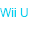
<style>
.page{position:relative;width:30px;height:30px;background:#ffffff}
.page>*{position:absolute;margin:0}
.t1{font:12px "ArialMT";color:#01d0ef}
</style>
<div class="page">
<p class="t1" style="left:0px;top:8px;width:28px;height:9px">Wii U</p>
</div>
